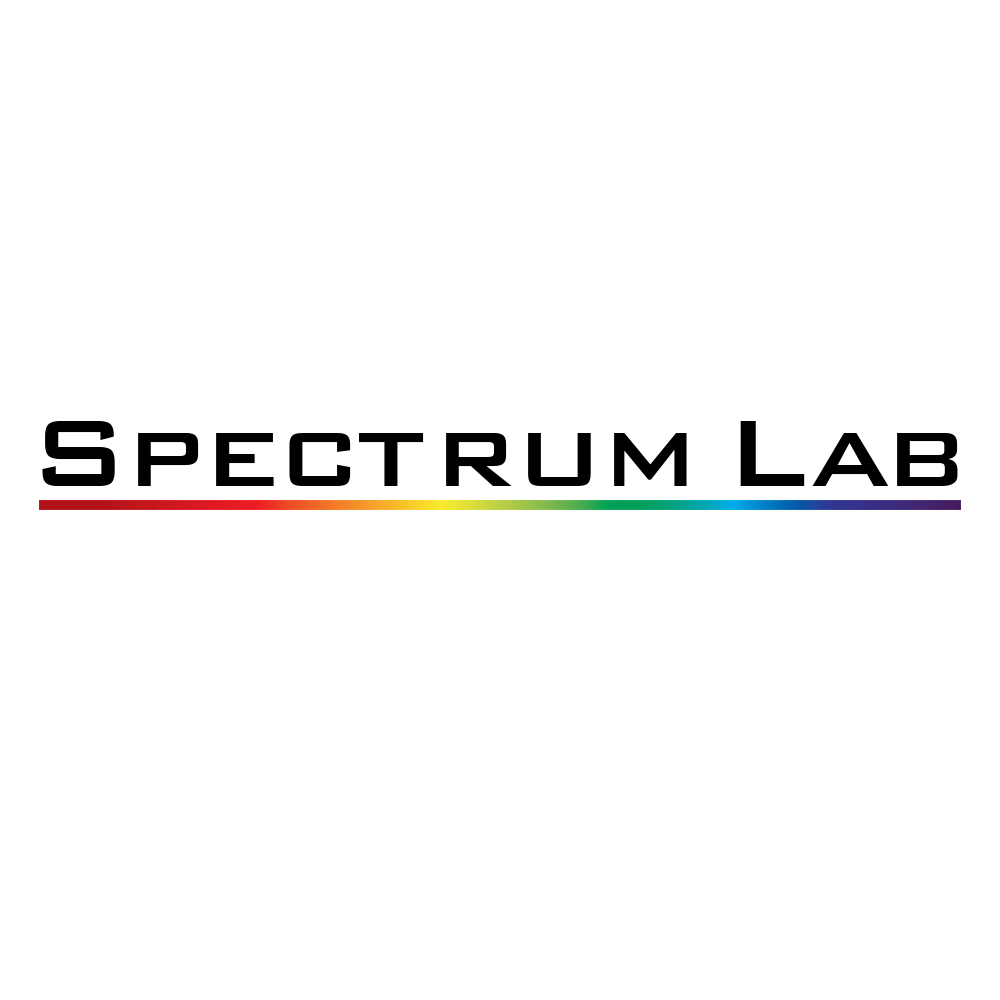
<style>
.page{position:relative;width:1000px;height:1000px;background:#ffffff}
.page>*{position:absolute;margin:0}
.t1{font:125px "BankGothic";color:#000000}
</style>
<div class="page">
<p class="t1" style="left:42px;top:421px;width:916px;height:65px">Spectrum Lab</p>
</div>
